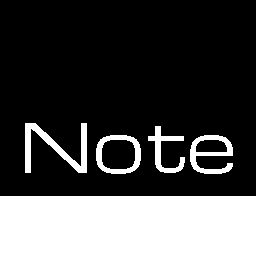
<style>
.page{position:relative;width:256px;height:256px;background:#000000}
.page>*{position:absolute;margin:0}
.t1{font:66px "Michroma";color:#ffffff}
</style>
<div class="page">
<p class="t1" style="left:25px;top:123px;width:208px;height:51px">Note</p>
</div>
